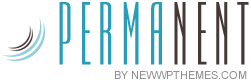
<style>
.page{position:relative;width:251px;height:80px;background:#ffffff}
.page>*{position:absolute;margin:0}
.t1{font:72px "a_EmpirialCpsTtr";letter-spacing:0.075em;color:#289db8;text-transform:uppercase;font-weight:bold}
.t2{font:72px "a_EmpirialCpsTtr";letter-spacing:0.075em;color:#453835;text-transform:uppercase;font-weight:bold}
.t3{font:11px "ArialMT";color:#909090;text-transform:uppercase}
</style>
<div class="page">
<p class="t1" style="left:59px;top:2px;width:190px;height:63px">perma<span class="t2">nent</span></p>
<p class="t3" style="left:115px;top:71px;width:132px;height:8px">by NewWpThemes.com</p>
</div>
